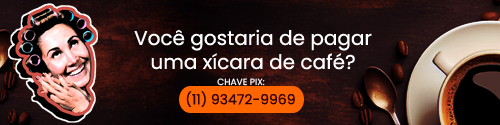
<style>
.page{position:relative;width:500px;height:125px}
.page>*{position:absolute;margin:0}
.t1{font:20px "Poppins-Regular";color:#fefefe}
.t2{font:9px "Poppins-Regular";color:#ffffff;text-transform:uppercase}
.t3{font:14px "Poppins-Regular";color:#330000;text-transform:uppercase}
</style>
<div class="page">
<p class="t1" style="left:134px;top:29px;width:238px;height:41px;text-align:center">Você gostaria de pagar<br>uma xícara de café?</p>
<p class="t2" style="left:217px;top:78px;width:48px;height:8px">chave pix:</p>
<p class="t3" style="left:186px;top:91px;width:109px;height:16px">(11) 93472-9969</p>
</div>
